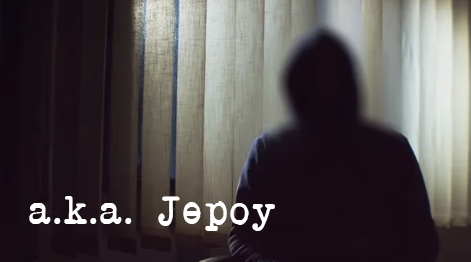
<style>
.page{position:relative;width:471px;height:262px}
.page>*{position:absolute;margin:0}
.t1{font:38.6px "AnotherTypewriter";letter-spacing:0.091em;color:#ffffff}
</style>
<div class="page">
<p class="t1" style="left:29px;top:196px;width:246px;height:35px">a.k.a. Jepoy</p>
</div>
